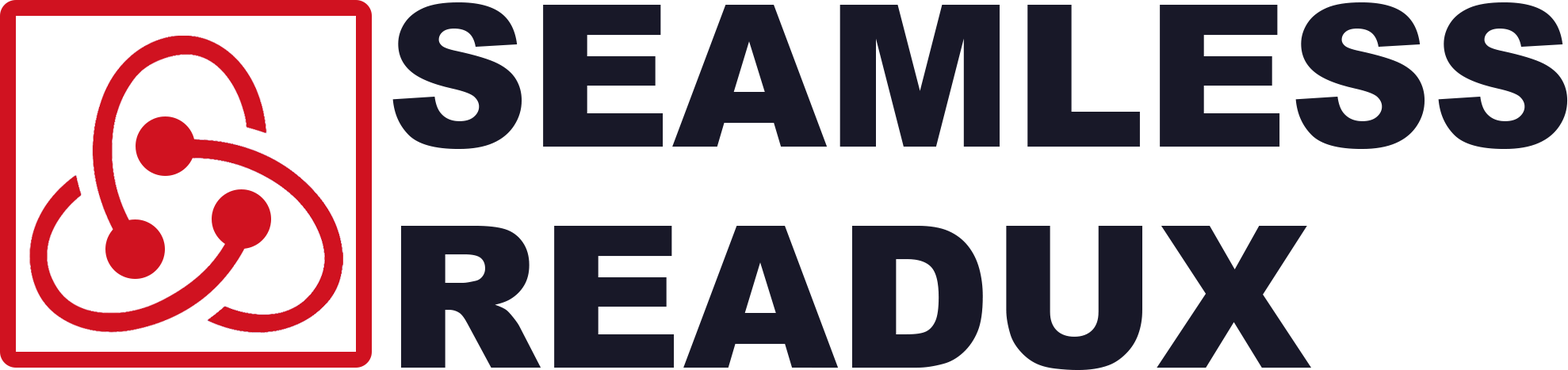
<style>
.page{position:relative;width:1568px;height:370px;background:#ffffff}
.page>*{position:absolute;margin:0}
.t1{font:198.2px "Arial-Black";color:#181828}
</style>
<div class="page">
<p class="t1" style="left:392px;top:2px;width:1176px;height:147px">SEAMLESS</p>
<p class="t1" style="left:401px;top:226px;width:910px;height:144px">READUX</p>
</div>
